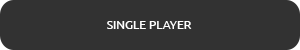
<style>
.page{position:relative;width:300px;height:50px;background:#323232}
.page>*{position:absolute;margin:0}
.t1{font:12px "Ubuntu";color:#ffffff}
</style>
<div class="page">
<p class="t1" style="left:107px;top:21px;width:85px;height:8px">SINGLE PLAYER</p>
</div>
